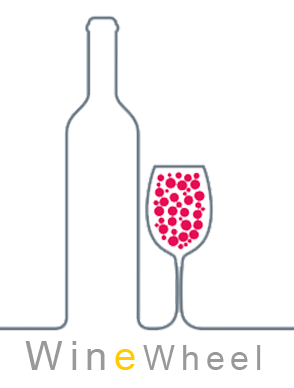
<style>
.page{position:relative;width:294px;height:388px;background:#ffffff}
.page>*{position:absolute;margin:0}
.t1{font:40px "ArialMT";letter-spacing:0.17em;color:#999999}
.t2{font:40px "ArialMT";letter-spacing:0.17em;color:#ffcc00}
.t3{font:34px "ArialMT";letter-spacing:0.17em;color:#999999}
</style>
<div class="page">
<p class="t1" style="left:25px;top:341px;width:110px;height:29px">Win<span class="t2">e</span></p>
<p class="t3" style="left:143px;top:345px;width:118px;height:25px">Wheel</p>
</div>
